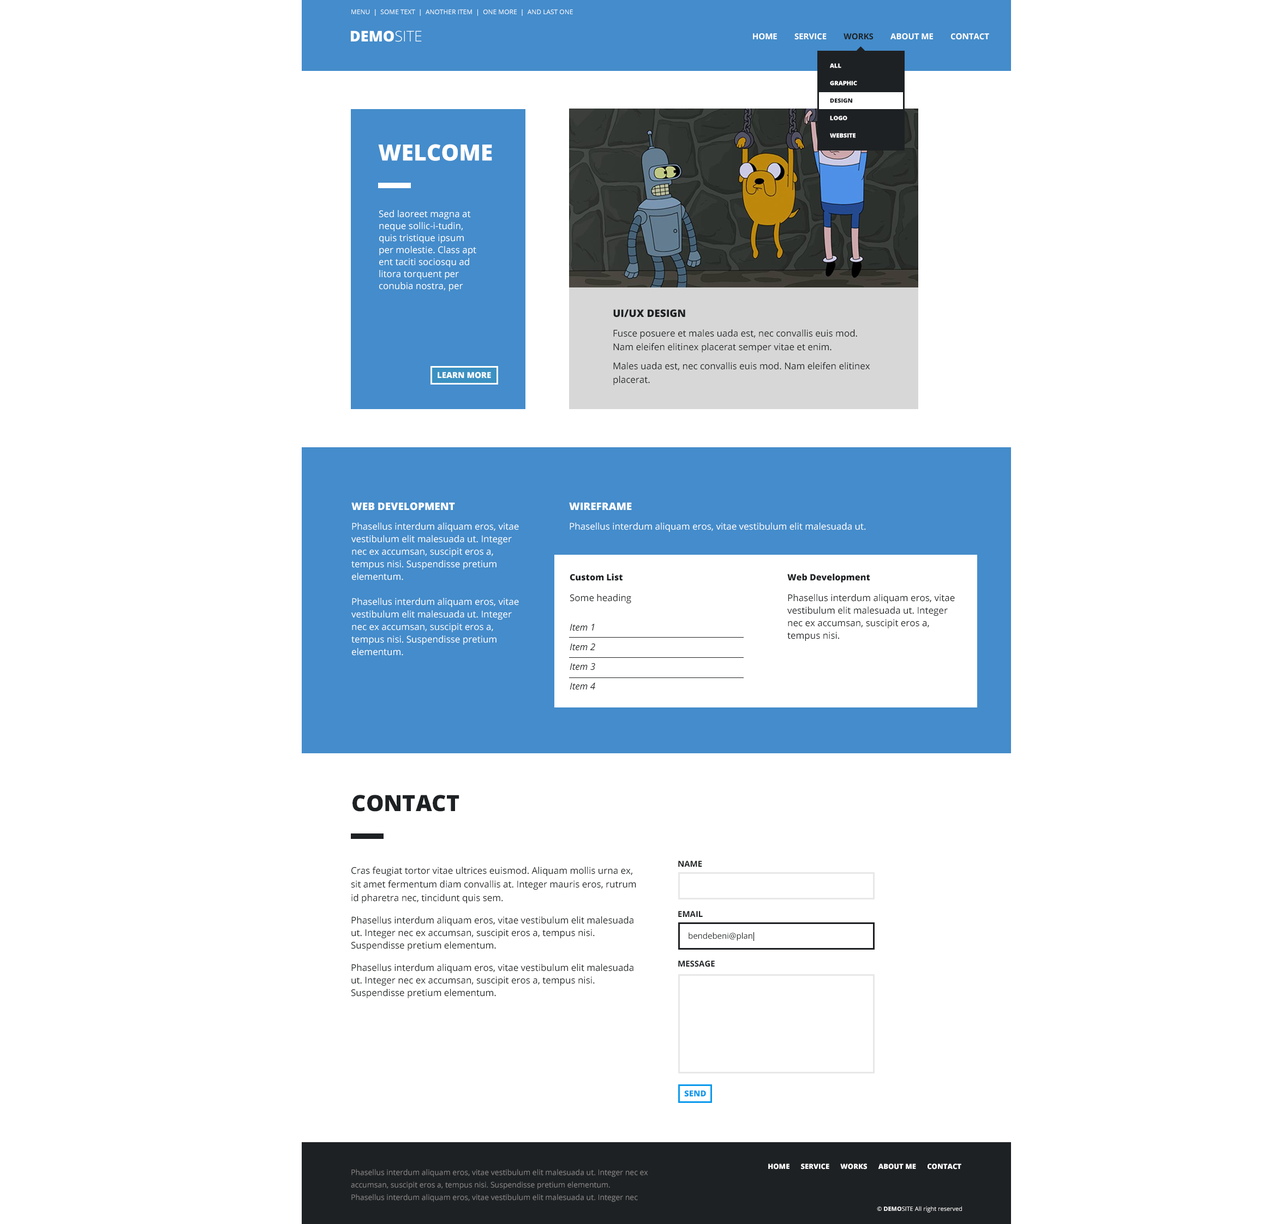
<style>
.page{position:relative;width:1268px;height:1224px;background:#ffffff}
.page>*{position:absolute;margin:0}
.t1{font:6.5px "OpenSans";color:#ffffff;text-transform:uppercase}
.t2{font:14.7px "OpenSans-Extrabold";color:#ffffff;text-transform:uppercase}
.t3{font:14.7px "OpenSans-Light";color:#ffffff;text-transform:uppercase}
.t4{font:8.2px "OpenSans-Bold";color:#ffffff;text-transform:uppercase}
.t5{font:8.2px "OpenSans-Bold";color:#1e2123;text-transform:uppercase}
.t6{font:6px/12px "OpenSans-Extrabold";color:#ffffff;text-transform:uppercase}
.t7{font:6px/12px "OpenSans-Extrabold";color:#1e2123;text-transform:uppercase}
.t8{font:22.4px "OpenSans-Extrabold";color:#ffffff;text-transform:uppercase}
.t9{font:9.3px/12px "OpenSans";color:#ffffff}
.t10{font:10.4px "OpenSans-Extrabold";color:#1e2123;text-transform:uppercase}
.t11{font:9.3px/13.6px "OpenSans";color:#1e2123}
.t12{font:8.2px "OpenSans-Extrabold";color:#ffffff;text-transform:uppercase}
.t13{font:10.4px "OpenSans-Extrabold";color:#ffffff;text-transform:uppercase}
.t14{font:9.3px/12.5px "OpenSans";color:#ffffff}
.t15{font:9.3px "OpenSans";color:#ffffff}
.t16{font:8.7px "OpenSans-Extrabold";color:#1e2123}
.t17{font:9.3px "OpenSans";color:#1e2123}
.t18{font:9.3px/12.5px "OpenSans";color:#1e2123}
.t19{font:9.3px/19.6px "OpenSans-Italic";color:#1e2123}
.t20{font:22.4px "OpenSans-Extrabold";color:#1e2123;text-transform:uppercase}
.t21{font:8.2px "OpenSans";color:#1e2123}
.t22{font:8.2px "OpenSans-Extrabold";color:#0c9aec;text-transform:uppercase}
.t23{font:7.6px/12.5px "OpenSans";color:#858585}
.t24{font:7.1px "OpenSans-Extrabold";color:#ffffff;text-transform:uppercase}
.t25{font:6px "OpenSans";color:#ffffff}
.t26{font:6px "OpenSans-Bold";color:#ffffff;text-transform:uppercase}
.t27{font:6px "OpenSans";color:#ffffff;text-transform:uppercase}
</style>
<div class="page">
<p class="t1" style="left:351px;top:9px;width:222px;height:7px">menu  |  Some text  |  Another item  |  one more  |  and last one</p>
<p class="t2" style="left:351px;top:31px;width:71px;height:11px">DEMO<span class="t3">SITE</span></p>
<p class="t4" style="left:753px;top:33px;width:236px;height:7px">Home        Service        <span class="t5">Works</span>        About Me        Contact</p>
<p class="t6" style="left:830px;top:63px;width:27px;height:75px">All<br>Graphic<br><span class="t7">Design<br></span>Logo<br>Website</p>
<p class="t8" style="left:378px;top:144px;width:114px;height:17px">Welcome</p>
<p class="t9" style="left:379px;top:210px;width:97px;height:81px">Sed laoreet magna at neque sollic-i-tudin, quis tristique ipsum per molestie. Class apt ent taciti sociosqu ad litora torquent per conubia nostra, per inceptos himenaeos. Vestibulum facilisis malesuada. Integer rhoncus laoreet velit</p>
<p class="t10" style="left:613px;top:309px;width:72px;height:8px">Ui/Ux Design</p>
<p class="t11" style="left:613px;top:329px;width:257px;height:56px">Fusce posuere et males uada est, nec convallis euis mod. Nam eleifen elitinex placerat semper vitae et enim.<br>Males uada est, nec convallis euis mod. Nam eleifen elitinex placerat.</p>
<p class="t12" style="left:437px;top:372px;width:54px;height:7px">Learn More</p>
<p class="t13" style="left:351px;top:502px;width:104px;height:9px">Web Development</p>
<p class="t13" style="left:569px;top:502px;width:63px;height:8px">WireFrame</p>
<p class="t14" style="left:351px;top:523px;width:168px;height:133px">Phasellus interdum aliquam eros, vitae vestibulum elit malesuada ut. Integer nec ex accumsan, suscipit eros a, tempus nisi. Suspendisse pretium elementum.<br><br>Phasellus interdum aliquam eros, vitae vestibulum elit malesuada ut. Integer nec ex accumsan, suscipit eros a, tempus nisi. Suspendisse pretium elementum.</p>
<p class="t15" style="left:569px;top:523px;width:297px;height:9px">Phasellus interdum aliquam eros, vitae vestibulum elit malesuada ut.</p>
<p class="t16" style="left:569px;top:573px;width:53px;height:8px">Custom List</p>
<p class="t16" style="left:787px;top:573px;width:83px;height:10px">Web Development</p>
<p class="t17" style="left:570px;top:594px;width:61px;height:9px">Some heading</p>
<p class="t18" style="left:787px;top:594px;width:168px;height:47px">Phasellus interdum aliquam eros, vitae vestibulum elit malesuada ut. Integer nec ex accumsan, suscipit eros a, tempus nisi.</p>
<p class="t19" style="left:569px;top:623px;width:26px;height:67px">Item 1<br>Item 2<br>Item 3<br>Item 4</p>
<p class="t20" style="left:352px;top:795px;width:107px;height:17px">Contact</p>
<p class="t18" style="left:351px;top:867px;width:285px;height:131px"><span class="t11">Cras feugiat tortor vitae ultrices euismod. Aliquam mollis urna ex, sit amet fermentum diam convallis at. Integer mauris eros, rutrum id pharetra nec, tincidunt quis sem.<br></span>Phasellus interdum aliquam eros, vitae vestibulum elit malesuada ut. Integer nec ex accumsan, suscipit eros a, tempus nisi. Suspendisse pretium elementum.<br>Phasellus interdum aliquam eros, vitae vestibulum elit malesuada ut. Integer nec ex accumsan, suscipit eros a, tempus nisi. Suspendisse pretium elementum.</p>
<p class="t5" style="left:678px;top:861px;width:24px;height:6px">Name</p>
<p class="t5" style="left:678px;top:911px;width:25px;height:6px">Email</p>
<p class="t21" style="left:688px;top:932px;width:64px;height:9px">bendebeni@plan</p>
<p class="t5" style="left:678px;top:961px;width:37px;height:6px">Message</p>
<p class="t22" style="left:684px;top:1090px;width:22px;height:7px">Send</p>
<p class="t23" style="left:351px;top:1169px;width:297px;height:33px">Phasellus interdum aliquam eros, vitae vestibulum elit malesuada ut. Integer nec ex accumsan, suscipit eros a, tempus nisi. Suspendisse pretium elementum.<br>Phasellus interdum aliquam eros, vitae vestibulum elit malesuada ut. Integer nec</p>
<p class="t24" style="left:768px;top:1163px;width:193px;height:6px">Home      Service      Works      About Me      Contact</p>
<p class="t25" style="left:877px;top:1206px;width:85px;height:7px">© <span class="t26">DEMO</span><span class="t27">SITE</span> All right reserved</p>
</div>
